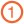
<style>
.page{position:relative;width:24px;height:24px;background:#ffffff}
.page>*{position:absolute;margin:0}
.t1{font:15.3px "HelveticaNeue";letter-spacing:0.05em;color:#f16531}
</style>
<div class="page">
<p class="t1" style="left:8px;top:6px;width:5px;height:12px">1</p>
</div>
